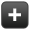
<style>
.page{position:relative;width:30px;height:30px}
.page>*{position:absolute;margin:0}
.t1{font:24px "ITCKabelStd-Bold";color:#ffffff}
</style>
<div class="page">
<p class="t1" style="left:8px;top:8px;width:13px;height:13px">+</p>
</div>
